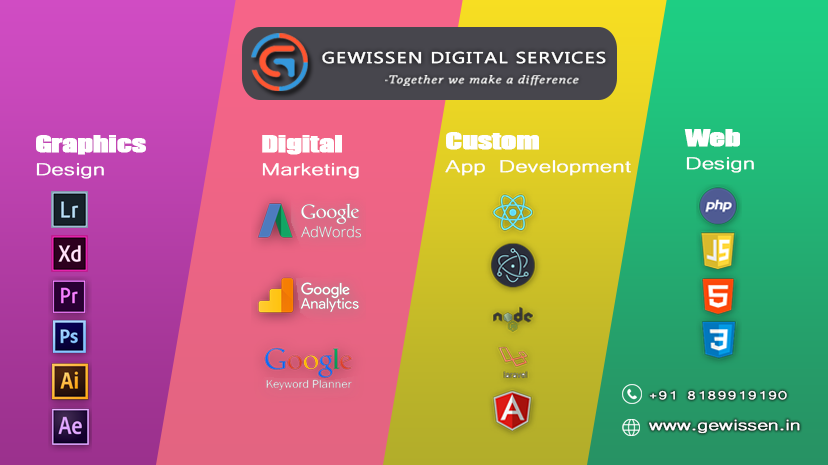
<style>
.page{position:relative;width:828px;height:465px}
.page>*{position:absolute;margin:0}
.t1{font:15.7px "MicrosoftPhagsPa";letter-spacing:0.05em;color:#fcfcfc;font-weight:bold;scale:1.22 1}
.t2{font:12px "ChaparralPro-LightIt";letter-spacing:0.05em;color:#ffffff;font-weight:bold;scale:1.2 1}
.t3{font:22.1px/22.9px "Impact";letter-spacing:-0.02em;color:#ffffff;font-weight:bold;scale:1.34 1}
.t4{font:22.1px/22.9px "Microsoft-Yi-Baiti";letter-spacing:-0.02em;color:#ffffff;font-weight:bold;scale:1.34 1}
.t5{font:19.2px/31.5px "Microsoft-Yi-Baiti";letter-spacing:-0.02em;color:#ffffff;font-weight:bold;scale:1.34 1}
.t6{font:14.5px/31.5px "Microsoft-Yi-Baiti";letter-spacing:-0.02em;color:#ffffff;font-weight:bold;scale:1.34 1}
</style>
<div class="page">
<p class="t1" style="left:322px;top:51px;width:284px;height:13px">GEWISSEN DIGITAL SERVICES</p>
<p class="t2" style="left:385px;top:75px;width:194px;height:11px">-Together we make a difference</p>
<p class="t3" style="left:36px;top:135px;width:110px;height:44px">Graphics <span class="t4">Design</span></p>
<p class="t4" style="left:262px;top:135px;width:97px;height:44px"><span class="t3">Digital </span>Marketing</p>
<p class="t4" style="left:445px;top:132px;width:186px;height:44px"><span class="t3">Custom <br></span>App Development</p>
<p class="t4" style="left:684px;top:129px;width:70px;height:44px"><span class="t3">Web </span>Design</p>
<p class="t5" style="left:649px;top:390px;width:151px;height:44px"><span class="t6">+91 8189919190<br></span>www.gewissen.in</p>
</div>
